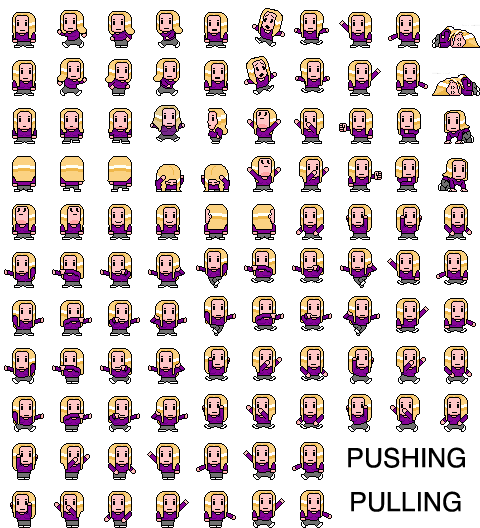
<style>
.page{position:relative;width:480px;height:528px;background:#ffffff}
.page>*{position:absolute;margin:0}
.t1{font:26.5px "Helvetica";color:#000000}
</style>
<div class="page">
<p class="t1" style="left:348px;top:447px;width:117px;height:21px">PUSHING</p>
<p class="t1" style="left:351px;top:491px;width:110px;height:21px">PULLING</p>
</div>
